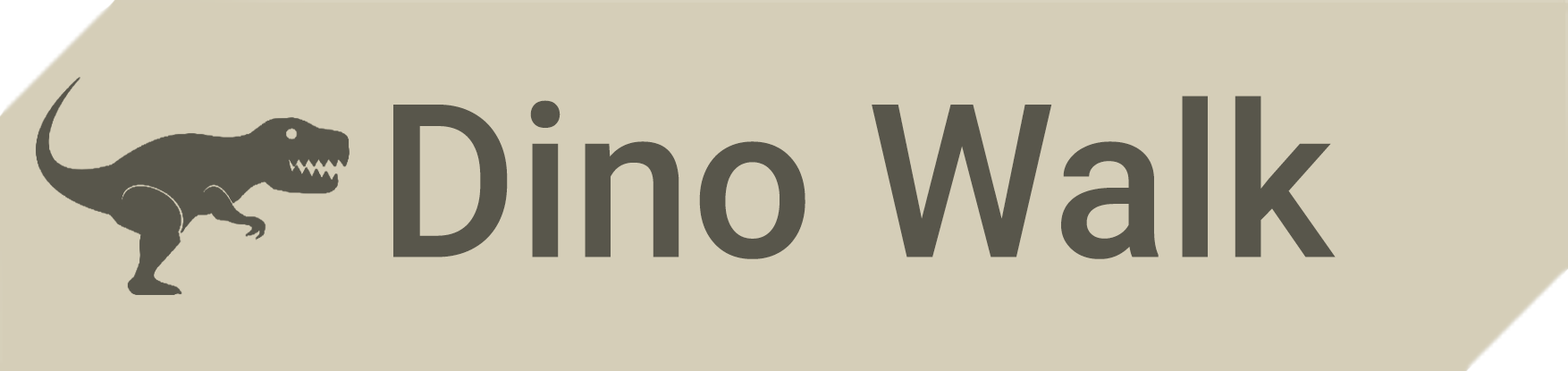
<style>
.page{position:relative;width:1568px;height:371px;background:#d5ceb8}
.page>*{position:absolute;margin:0}
.t1{font:214.2px "Roboto-Medium";color:#58564b}
</style>
<div class="page">
<p class="t1" style="left:393px;top:96px;width:943px;height:163px">Dino Walk</p>
</div>
